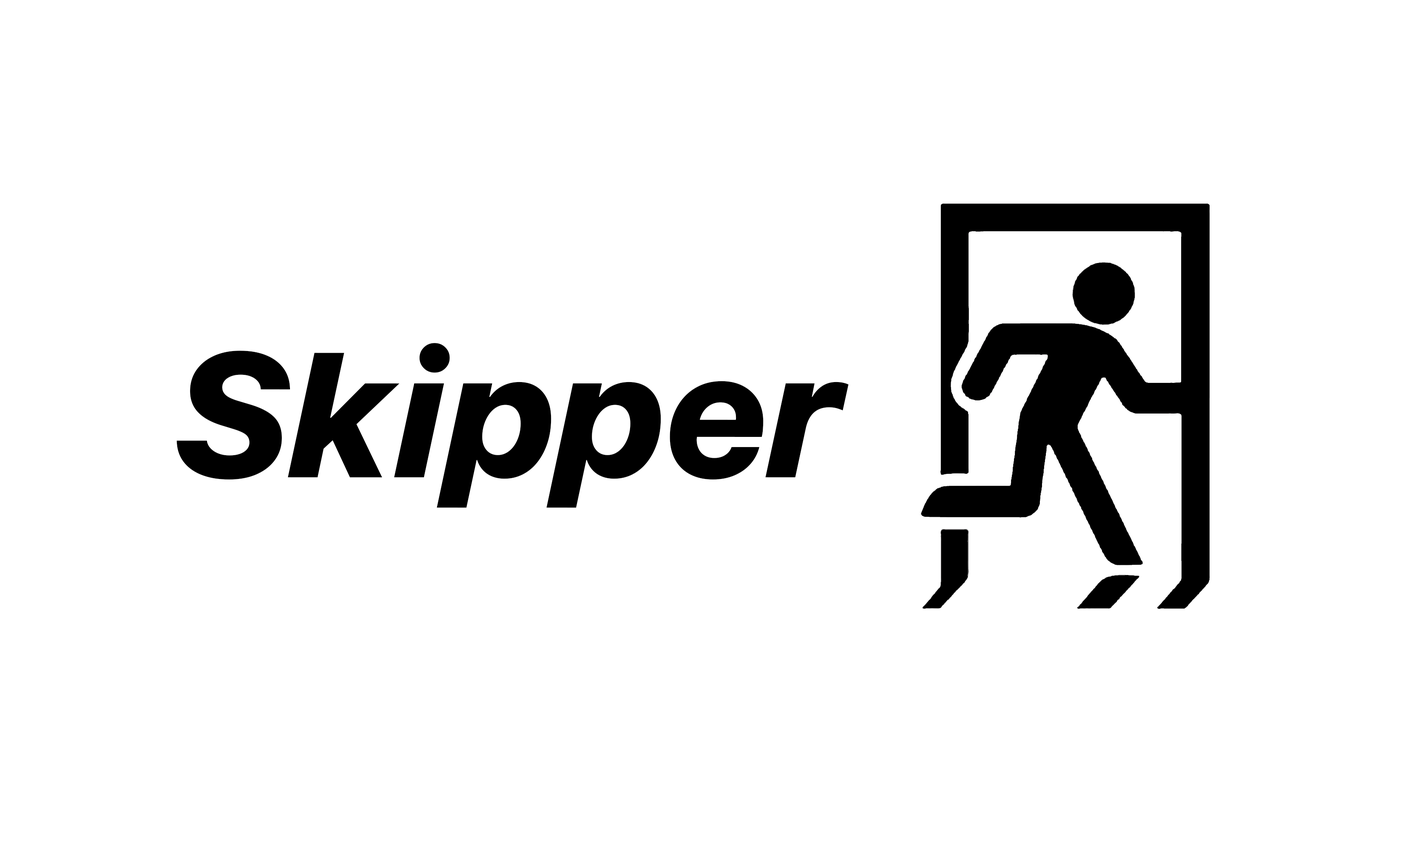
<style>
.page{position:relative;width:1403px;height:850px;background:#ffffff}
.page>*{position:absolute;margin:0}
.t1{font:176.6px "SFPro-HeavyItalic";color:#000000}
</style>
<div class="page">
<p class="t1" style="left:176px;top:343px;width:672px;height:165px">Skipper</p>
</div>
